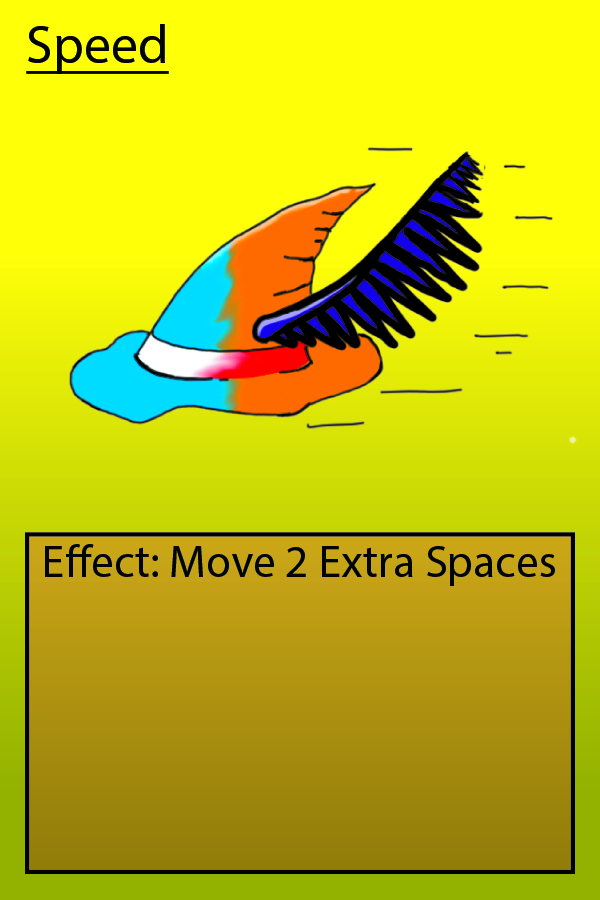
<style>
.page{position:relative;width:600px;height:900px;background:#ffff08}
.page>*{position:absolute;margin:0}
.t1{font:54.2px "Vatican-Medium";color:#000000;text-decoration:underline}
.t2{font:45.8px "Vatican-Medium";color:#000000}
</style>
<div class="page">
<p class="t1" style="left:26px;top:24px;width:143px;height:50px">Speed</p>
<p class="t2" style="left:45px;top:544px;width:510px;height:42px">Effect: Move 2 Extra Spaces</p>
</div>
